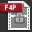
<style>
.page{position:relative;width:32px;height:32px;background:#333333}
.page>*{position:absolute;margin:0}
.t1{font:8px "MyriadPro-BoldCond";letter-spacing:0.005em;text-transform:uppercase}
</style>
<div class="page">
<p class="t1" style="left:9px;top:4px;width:7px;height:7px">4P</p>
</div>
